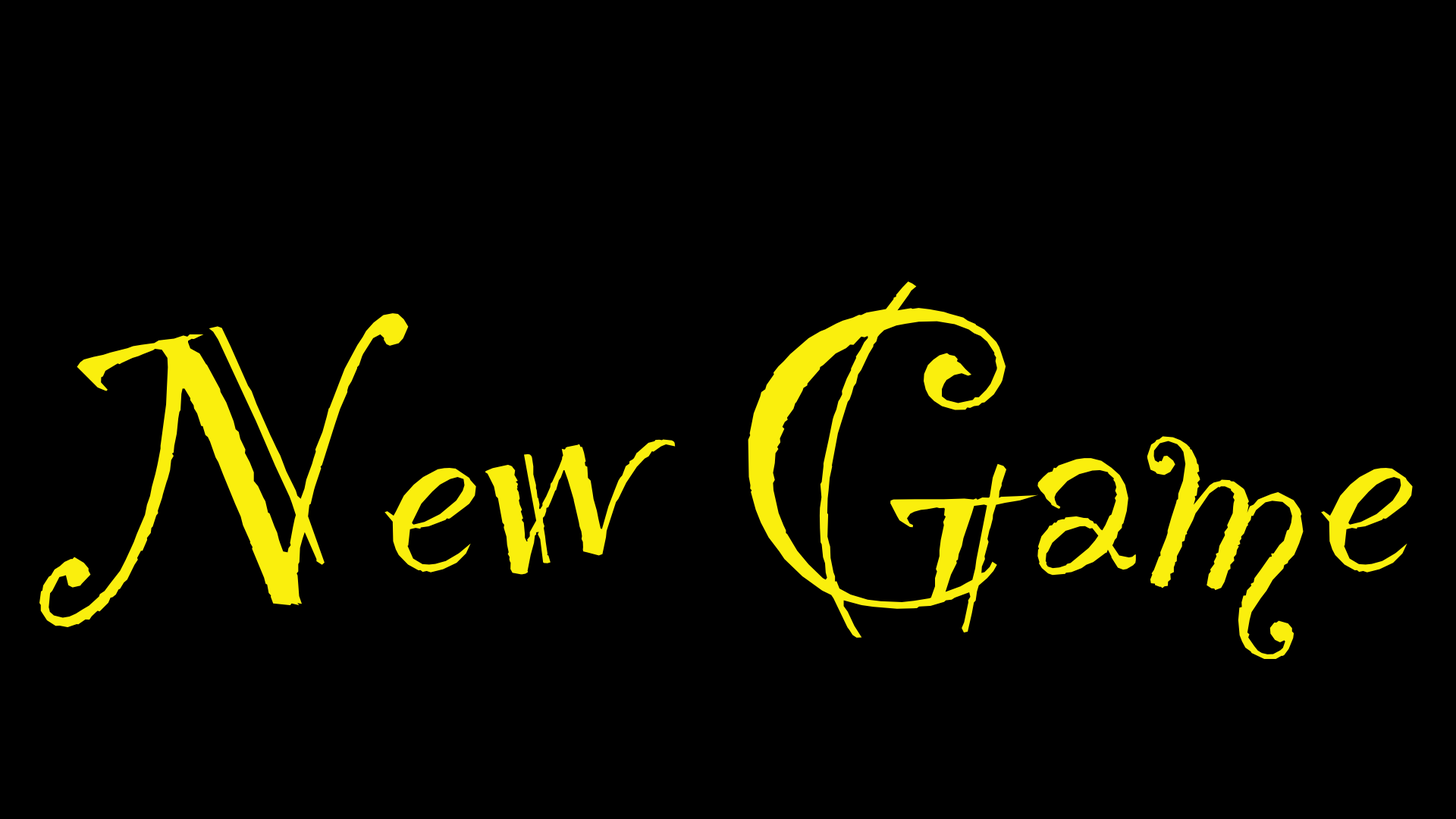
<style>
.page{position:relative;width:1456px;height:819px;background:#000000}
.page>*{position:absolute;margin:0}
.t1{font:455px "PartyLetPlain";color:#fcef00}
</style>
<div class="page">
<p class="t1" style="left:0px;top:0px;width:1456px;height:819px;text-align:center">New Game</p>
</div>
